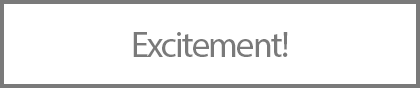
<style>
.page{position:relative;width:420px;height:88px;background:#ffffff}
.page>*{position:absolute;margin:0}
.t1{font:36px "MyriadPro-Regular";letter-spacing:-0.05em;color:#7a7a7a}
</style>
<div class="page">
<p class="t1" style="left:133px;top:32px;width:155px;height:25px">Excitement!</p>
</div>
